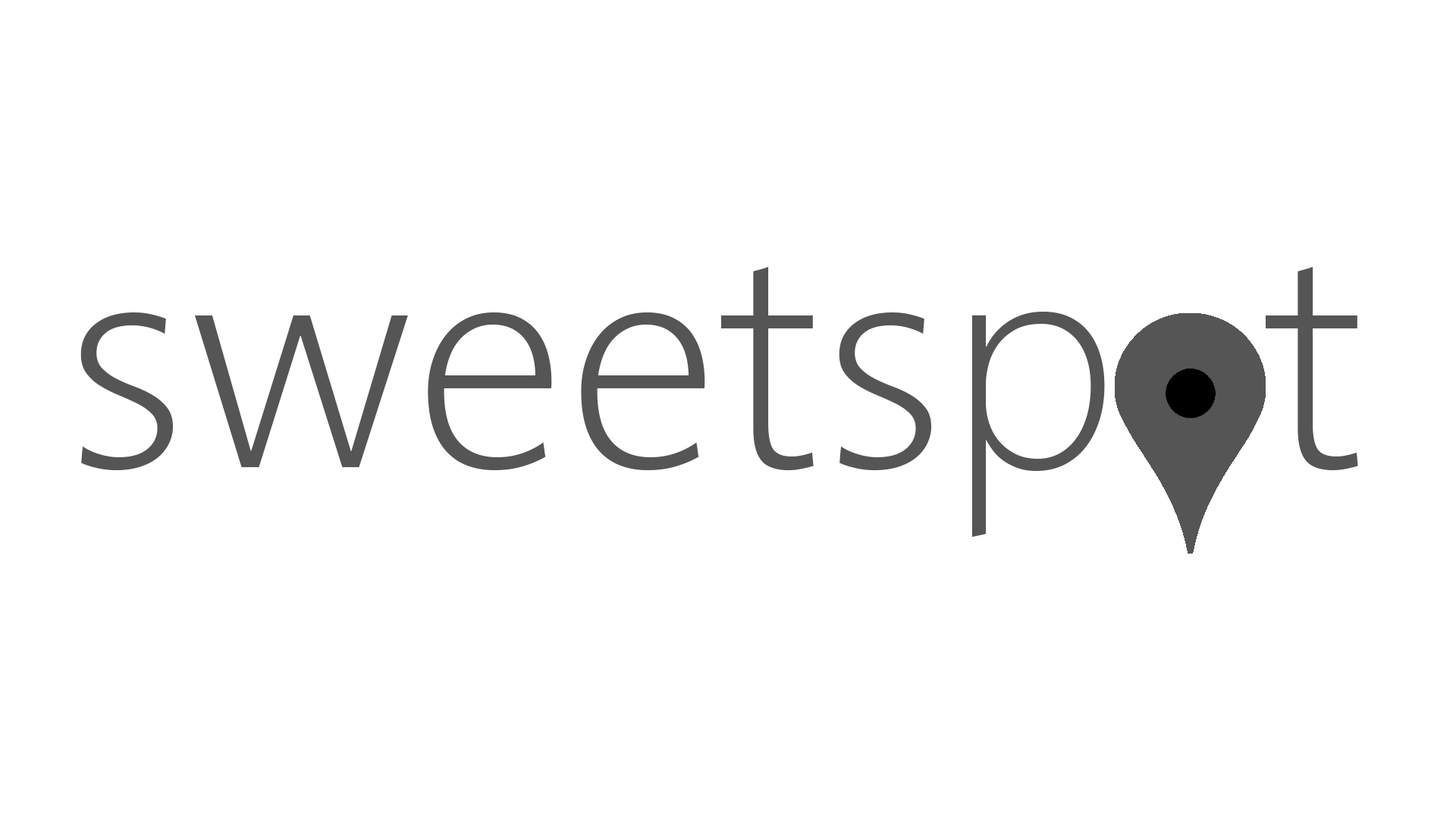
<style>
.page{position:relative;width:1456px;height:819px;background:#ffffff}
.page>*{position:absolute;margin:0}
.t1{font:303.3px "Segan-Light";color:#555555}
</style>
<div class="page">
<p class="t1" style="left:80px;top:267px;width:1278px;height:270px">sweetsp  t</p>
</div>
